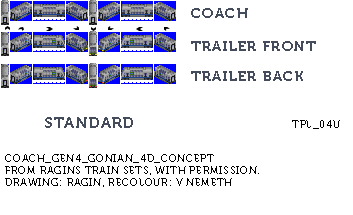
<style>
.page{position:relative;width:353px;height:215px;background:#ffffff}
.page>*{position:absolute;margin:0}
.t1{font:14px "Museo700-Regular";letter-spacing:0.1em;color:#444c5c;text-transform:uppercase}
.t2{font:15px "Museo700-Regular";letter-spacing:0.1em;color:#444c5c;text-transform:uppercase}
.t3{font:10px "Museo700-Regular";letter-spacing:0.075em;color:#000000;text-transform:uppercase}
</style>
<div class="page">
<p class="t1" style="left:191px;top:8px;width:57px;height:10px">coach</p>
<p class="t1" style="left:191px;top:41px;width:125px;height:10px">trailer front</p>
<p class="t1" style="left:191px;top:71px;width:112px;height:10px">trailer back</p>
<p class="t2" style="left:45px;top:117px;width:88px;height:11px">STANDARD</p>
<p class="t3" style="left:292px;top:120px;width:48px;height:9px">tpl_04u</p>
<p class="t3" style="left:5px;top:154px;width:254px;height:33px">Coach_Gen4_Gonian_4D_Concept<br>From Ragins Train Sets, with permission.<br>Drawing: Ragin, recolour: V Nemeth</p>
</div>
